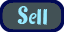
<style>
.page{position:relative;width:64px;height:32px;background:#425155}
.page>*{position:absolute;margin:0}
.t1{font:41.7px "FantasticFont";color:#97eaff}
</style>
<div class="page">
<p class="t1" style="left:17px;top:6px;width:30px;height:19px">Sell</p>
</div>
